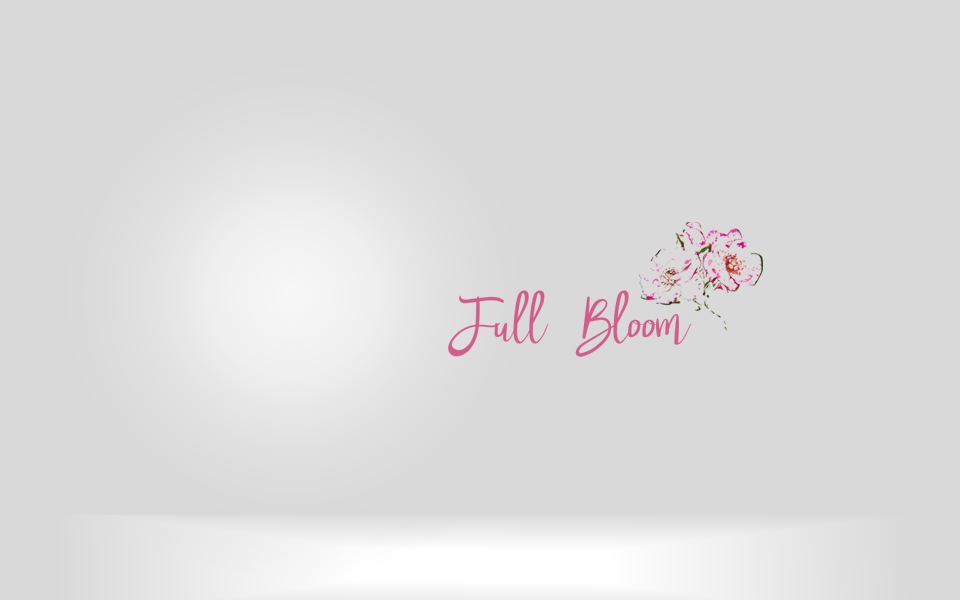
<style>
.page{position:relative;width:960px;height:600px;background:#d9d9d9}
.page>*{position:absolute;margin:0}
.t1{font:85.7px "Nastar";letter-spacing:-0.025em;color:#d25d89}
</style>
<div class="page">
<p class="t1" style="left:448px;top:290px;width:244px;height:67px">Full Bloom</p>
</div>
